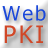
<style>
.page{position:relative;width:48px;height:48px}
.page>*{position:absolute;margin:0}
.t1{font:20px "Tahoma";letter-spacing:0.1em;color:#1b48da}
.t2{font:24px "Tahoma";letter-spacing:0.1em;color:#d14727}
</style>
<div class="page">
<p class="t1" style="left:2px;top:5px;width:44px;height:16px">Web</p>
<p class="t2" style="left:4px;top:25px;width:39px;height:18px">PKI</p>
</div>
